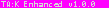
<style>
.page{position:relative;width:109px;height:8px;background:#ff00ff}
.page>*{position:absolute;margin:0}
.t1{font:9px "Consolas";color:#d8d8d8}
.t2{font:9px "Consolas";letter-spacing:-0.1em;color:#d8d8d8}
.t3{font:9px "Consolas";letter-spacing:-0.05em;color:#d8d8d8}
</style>
<div class="page">
<p class="t1" style="left:1px;top:1px;width:94px;height:6px">T<span class="t2">A:K</span> Enhanced <span class="t3">v1.0.0</span></p>
</div>
